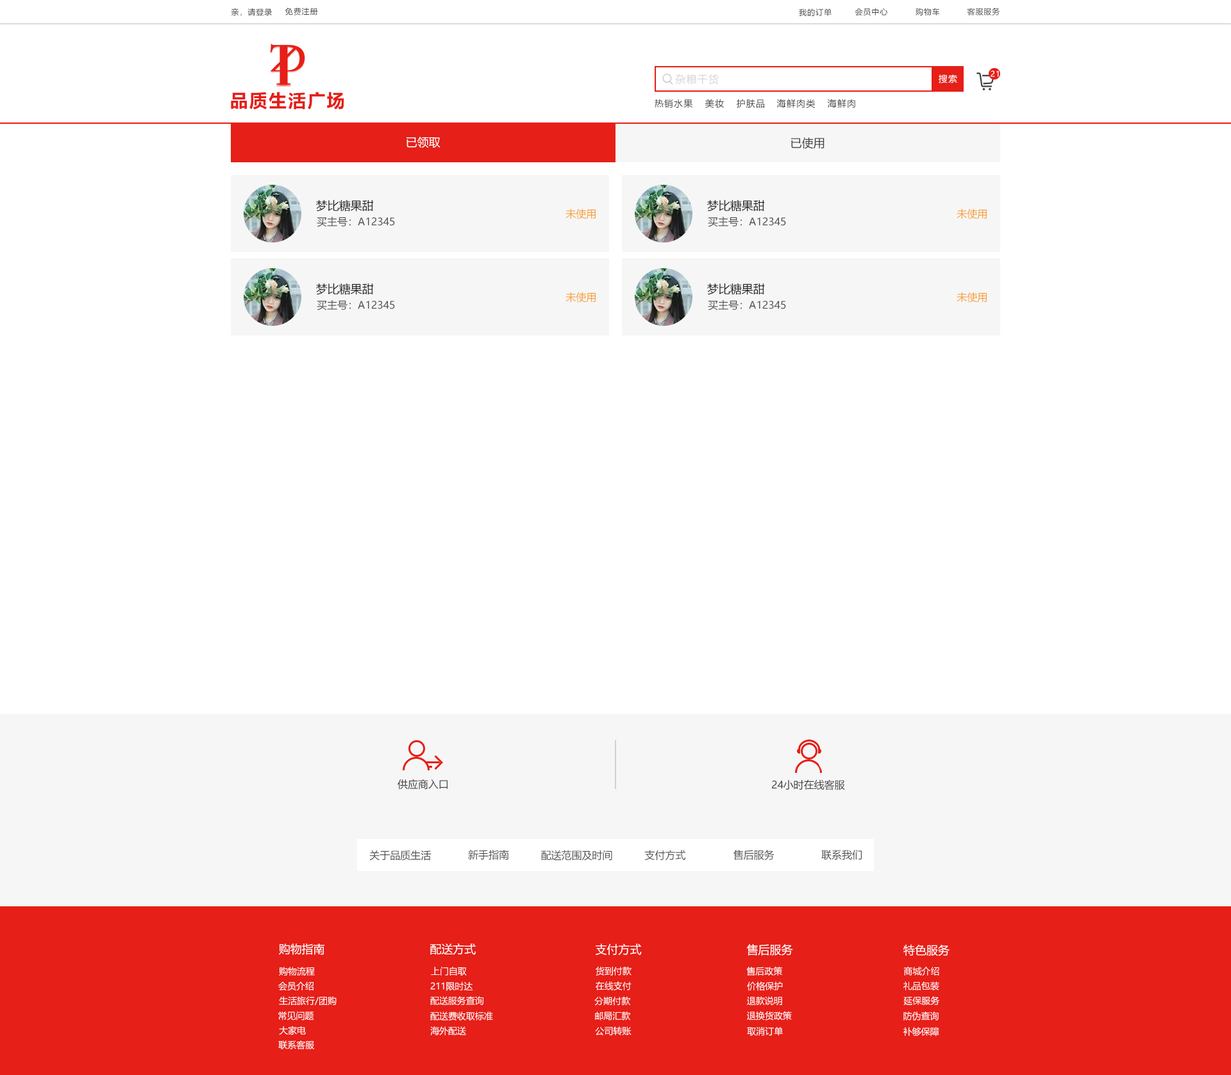
<style>
.page{position:relative;width:1231px;height:1075px;background:#ffffff}
.page>*{position:absolute;margin:0}
.t1{font:7.7px "MicrosoftYaHei";letter-spacing:0.08em;color:#404040}
.t2{font:10.3px "MicrosoftYaHei";letter-spacing:0.08em;color:#d6d6d6}
.t3{font:9px "MicrosoftYaHei";letter-spacing:0.08em;color:#ffffff}
.t4{font:7.7px "MicrosoftYaHei";letter-spacing:0.08em;color:#ffffff}
.t5{font:18px "MicrosoftYaHei-Bold";letter-spacing:0.08em;color:#e61f18}
.t6{font:9px "MicrosoftYaHei";letter-spacing:0.08em;color:#404040}
.t7{font:11.5px "MicrosoftYaHei";color:#ffffff}
.t8{font:11.5px "MicrosoftYaHei";color:#404040}
.t9{font:11.5px "MicrosoftYaHei";color:#202020}
.t10{font:10.3px "MicrosoftYaHei";color:#f99f36}
.t11{font:10.3px "MicrosoftYaHei";color:#505050}
.t12{font:10.3px "MicrosoftYaHei";color:#404040}
.t13{font:9px "MicrosoftYaHei";color:#ffffff}
</style>
<div class="page">
<p class="t1" style="left:231px;top:8px;width:41px;height:8px">亲，请登录</p>
<p class="t1" style="left:285px;top:8px;width:33px;height:7px">免费注册</p>
<p class="t1" style="left:799px;top:8px;width:33px;height:8px">我的订单</p>
<p class="t1" style="left:855px;top:8px;width:33px;height:8px">会员中心</p>
<p class="t1" style="left:916px;top:8px;width:24px;height:8px">购物车</p>
<p class="t1" style="left:967px;top:8px;width:33px;height:7px">客服服务</p>
<p class="t2" style="left:675px;top:74px;width:44px;height:11px">杂粮干货</p>
<p class="t3" style="left:939px;top:74px;width:18px;height:9px">搜索</p>
<p class="t4" style="left:991px;top:71px;width:8px;height:6px">21</p>
<p class="t5" style="left:231px;top:92px;width:113px;height:18px">品质生活广场</p>
<p class="t6" style="left:655px;top:99px;width:38px;height:9px">热销水果</p>
<p class="t6" style="left:705px;top:99px;width:19px;height:9px">美妆</p>
<p class="t6" style="left:737px;top:99px;width:27px;height:9px">护肤品</p>
<p class="t6" style="left:777px;top:99px;width:39px;height:9px">海鲜肉类</p>
<p class="t6" style="left:827px;top:99px;width:29px;height:9px">海鲜肉</p>
<p class="t7" style="left:407px;top:137px;width:34px;height:11px">已领取</p>
<p class="t8" style="left:791px;top:137px;width:34px;height:12px">已使用</p>
<p class="t9" style="left:316px;top:199px;width:58px;height:13px">梦比糖果甜</p>
<p class="t10" style="left:566px;top:208px;width:30px;height:11px">未使用</p>
<p class="t9" style="left:707px;top:199px;width:58px;height:13px">梦比糖果甜</p>
<p class="t10" style="left:957px;top:208px;width:30px;height:11px">未使用</p>
<p class="t11" style="left:317px;top:216px;width:78px;height:11px">买主号：A12345</p>
<p class="t11" style="left:708px;top:216px;width:78px;height:11px">买主号：A12345</p>
<p class="t9" style="left:316px;top:283px;width:58px;height:12px">梦比糖果甜</p>
<p class="t10" style="left:566px;top:292px;width:30px;height:11px">未使用</p>
<p class="t9" style="left:707px;top:283px;width:58px;height:12px">梦比糖果甜</p>
<p class="t10" style="left:957px;top:292px;width:30px;height:11px">未使用</p>
<p class="t11" style="left:317px;top:299px;width:78px;height:11px">买主号：A12345</p>
<p class="t11" style="left:708px;top:299px;width:78px;height:11px">买主号：A12345</p>
<p class="t12" style="left:398px;top:779px;width:50px;height:10px">供应商入口</p>
<p class="t12" style="left:772px;top:779px;width:73px;height:11px">24小时在线客服</p>
<p class="t11" style="left:369px;top:850px;width:62px;height:11px">关于品质生活</p>
<p class="t11" style="left:468px;top:849px;width:41px;height:11px">新手指南</p>
<p class="t11" style="left:541px;top:850px;width:71px;height:11px">配送范围及时间</p>
<p class="t11" style="left:645px;top:850px;width:41px;height:10px">支付方式</p>
<p class="t11" style="left:734px;top:850px;width:41px;height:10px">售后服务</p>
<p class="t11" style="left:822px;top:850px;width:40px;height:10px">联系我们</p>
<p class="t7" style="left:279px;top:943px;width:46px;height:12px">购物指南</p>
<p class="t7" style="left:430px;top:943px;width:46px;height:12px">配送方式</p>
<p class="t7" style="left:596px;top:943px;width:46px;height:12px">支付方式</p>
<p class="t7" style="left:746px;top:943px;width:47px;height:13px">售后服务</p>
<p class="t7" style="left:904px;top:944px;width:46px;height:12px">特色服务</p>
<p class="t13" style="left:279px;top:966px;width:36px;height:9px">购物流程</p>
<p class="t13" style="left:431px;top:966px;width:36px;height:9px">上门自取</p>
<p class="t13" style="left:596px;top:966px;width:36px;height:9px">货到付款</p>
<p class="t13" style="left:746px;top:966px;width:36px;height:9px">售后政策</p>
<p class="t13" style="left:904px;top:966px;width:36px;height:9px">商城介绍</p>
<p class="t13" style="left:278px;top:981px;width:36px;height:10px">会员介绍</p>
<p class="t13" style="left:430px;top:981px;width:43px;height:10px">211限时达</p>
<p class="t13" style="left:596px;top:981px;width:36px;height:9px">在线支付</p>
<p class="t13" style="left:747px;top:981px;width:36px;height:10px">价格保护</p>
<p class="t13" style="left:904px;top:981px;width:36px;height:9px">礼品包装</p>
<p class="t13" style="left:279px;top:996px;width:58px;height:9px">生活旅行/团购</p>
<p class="t13" style="left:430px;top:996px;width:54px;height:9px">配送服务查询</p>
<p class="t13" style="left:594px;top:996px;width:36px;height:10px">分期付款</p>
<p class="t13" style="left:747px;top:996px;width:35px;height:10px">退款说明</p>
<p class="t13" style="left:904px;top:996px;width:36px;height:9px">延保服务</p>
<p class="t13" style="left:278px;top:1011px;width:36px;height:9px">常见问题</p>
<p class="t13" style="left:430px;top:1011px;width:63px;height:9px">配送费收取标准</p>
<p class="t13" style="left:595px;top:1011px;width:35px;height:9px">邮局汇款</p>
<p class="t13" style="left:747px;top:1011px;width:45px;height:9px">退换货政策</p>
<p class="t13" style="left:904px;top:1011px;width:35px;height:9px">防伪查询</p>
<p class="t13" style="left:279px;top:1025px;width:27px;height:10px">大家电</p>
<p class="t13" style="left:430px;top:1026px;width:36px;height:9px">海外配送</p>
<p class="t13" style="left:595px;top:1026px;width:37px;height:10px">公司转账</p>
<p class="t13" style="left:747px;top:1027px;width:36px;height:9px">取消订单</p>
<p class="t13" style="left:904px;top:1027px;width:36px;height:9px">补够保障</p>
<p class="t13" style="left:278px;top:1040px;width:36px;height:9px">联系客服</p>
</div>
